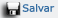
<style>
.page{position:relative;width:58px;height:18px;background:#eff0f1}
.page>*{position:absolute;margin:0}
.t1{font:10px "Verdana";color:#336ca1}
</style>
<div class="page">
<p class="t1" style="left:22px;top:4px;width:33px;height:8px">Salvar</p>
</div>
